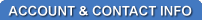
<style>
.page{position:relative;width:202px;height:20px;background:#4379c1}
.page>*{position:absolute;margin:0}
.t1{font:13.3px "Arial-BoldMT";color:#ffffff}
</style>
<div class="page">
<p class="t1" style="left:8px;top:5px;width:184px;height:11px">ACCOUNT &amp; CONTACT INFO</p>
</div>
